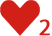
<style>
.page{position:relative;width:52px;height:36px;background:#d22018}
.page>*{position:absolute;margin:0}
.t1{font:23.4px "MyriadPro-Regular";letter-spacing:-0.1em;color:#d22018;font-weight:bold}
</style>
<div class="page">
<p class="t1" style="left:39px;top:19px;width:11px;height:17px">2</p>
</div>
